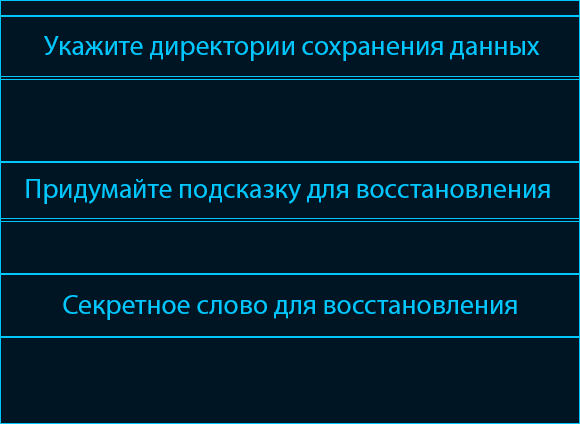
<style>
.page{position:relative;width:580px;height:424px;background:#001523}
.page>*{position:absolute;margin:0}
.t1{font:27.8px "MyriadPro-Regular";color:#00c7ff}
</style>
<div class="page">
<p class="t1" style="left:44px;top:36px;width:496px;height:25px">Укажите директории сохранения данных</p>
<p class="t1" style="left:26px;top:179px;width:524px;height:25px">Придумайте подсказку для восстановления</p>
<p class="t1" style="left:63px;top:295px;width:454px;height:25px">Секретное слово для восстановления</p>
</div>
